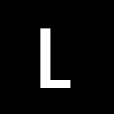
<style>
.page{position:relative;width:114px;height:114px;background:#000000}
.page>*{position:absolute;margin:0}
.t1{font:85.7px "Poppins-Medium";color:#ffffff;text-transform:uppercase}
</style>
<div class="page">
<p class="t1" style="left:40px;top:28px;width:31px;height:60px">L</p>
</div>
